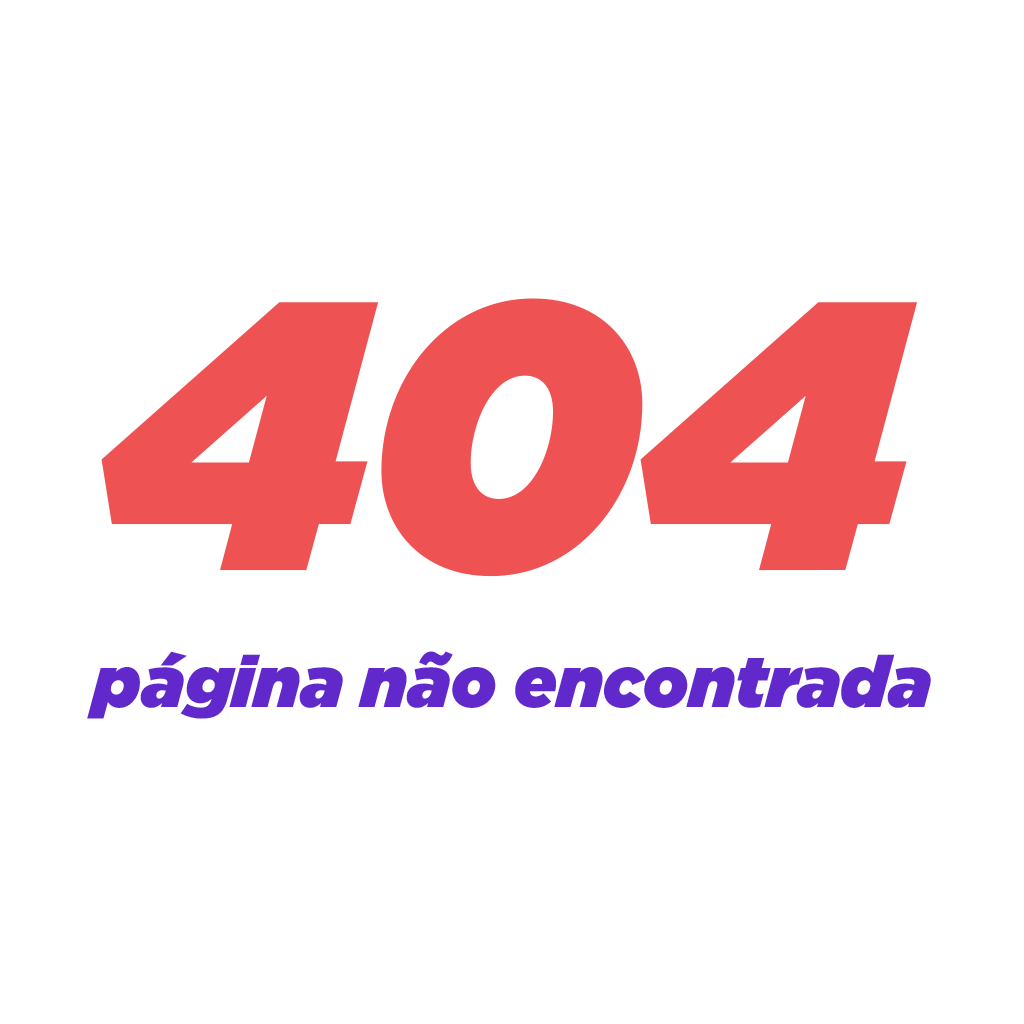
<style>
.page{position:relative;width:1024px;height:1024px;background:#ffffff}
.page>*{position:absolute;margin:0}
.t1{font:379.7px "Gotham-UltraItalic";color:#ee5253}
.t2{font:71.6px "Gotham-UltraItalic";color:#6128cb}
</style>
<div class="page">
<p class="t1" style="left:101px;top:298px;width:817px;height:279px">404</p>
<p class="t2" style="left:87px;top:651px;width:844px;height:68px">página não encontrada</p>
</div>
